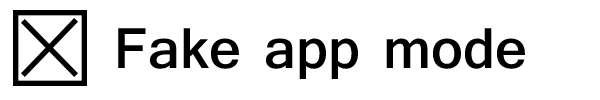
<style>
.page{position:relative;width:600px;height:100px;background:#ffffff}
.page>*{position:absolute;margin:0}
.t1{font:60px "Shruti-Bold";color:#000000}
</style>
<div class="page">
<p class="t1" style="left:118px;top:28px;width:407px;height:51px">Fake app mode</p>
</div>
